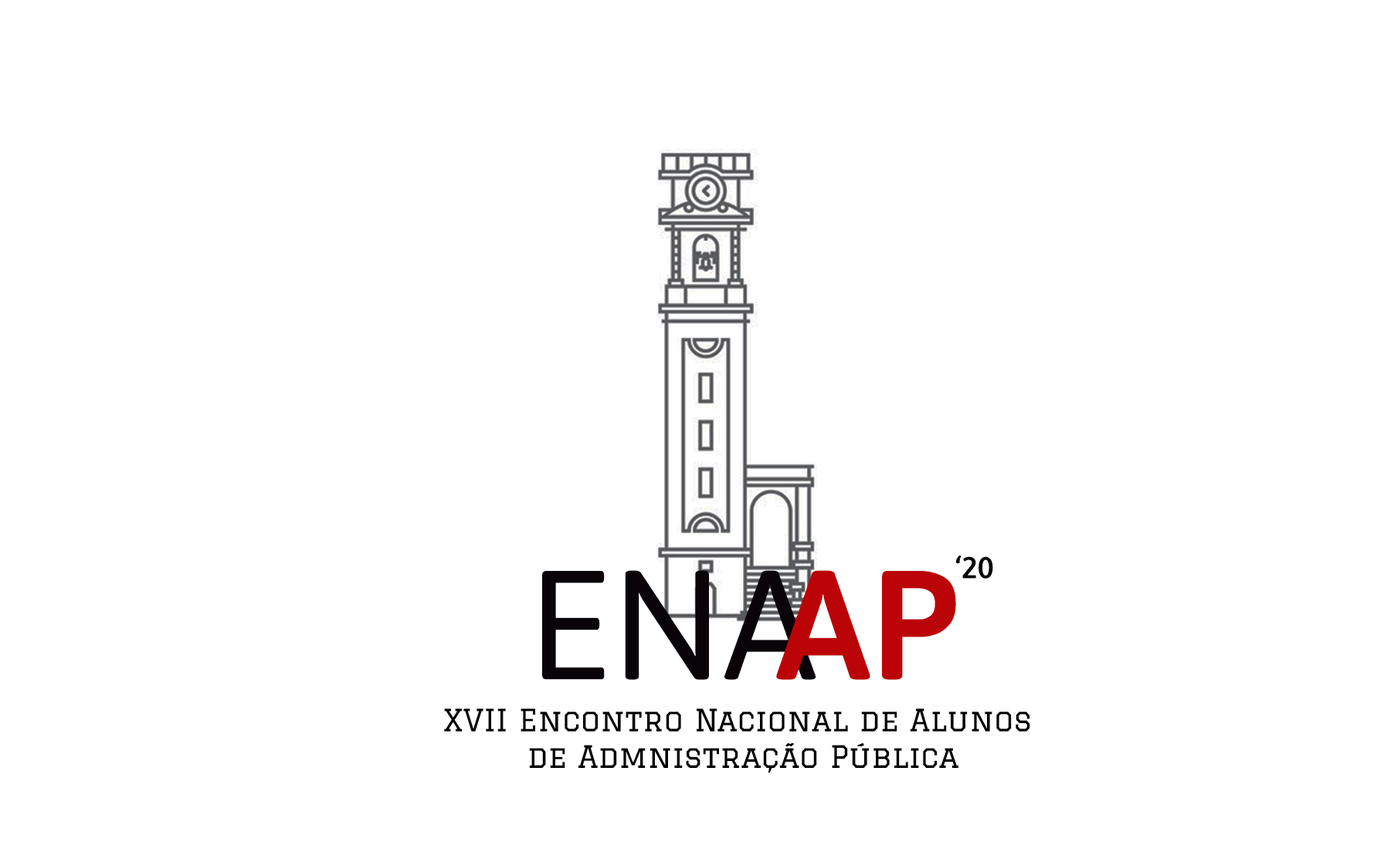
<style>
.page{position:relative;width:1394px;height:856px;background:#ffffff}
.page>*{position:absolute;margin:0}
.t1{font:30.4px "Asap-SemiBold";color:#010000}
.t2{font:154.6px "Asap-Regular";color:#080408}
.t3{font:154.6px "Asap-SemiBold";color:#bb0408}
.t4{font:30.4px "Graduate-Regular";color:#000000}
</style>
<div class="page">
<p class="t1" style="left:955px;top:555px;width:38px;height:23px">‘20</p>
<p class="t2" style="left:542px;top:570px;width:274px;height:110px">ENA</p>
<p class="t3" style="left:776px;top:570px;width:180px;height:110px">AP</p>
<p class="t4" style="left:444px;top:708px;width:586px;height:64px;text-align:center">XVII Encontro Nacional de Alunos <br>de Admnistração Pública</p>
</div>
